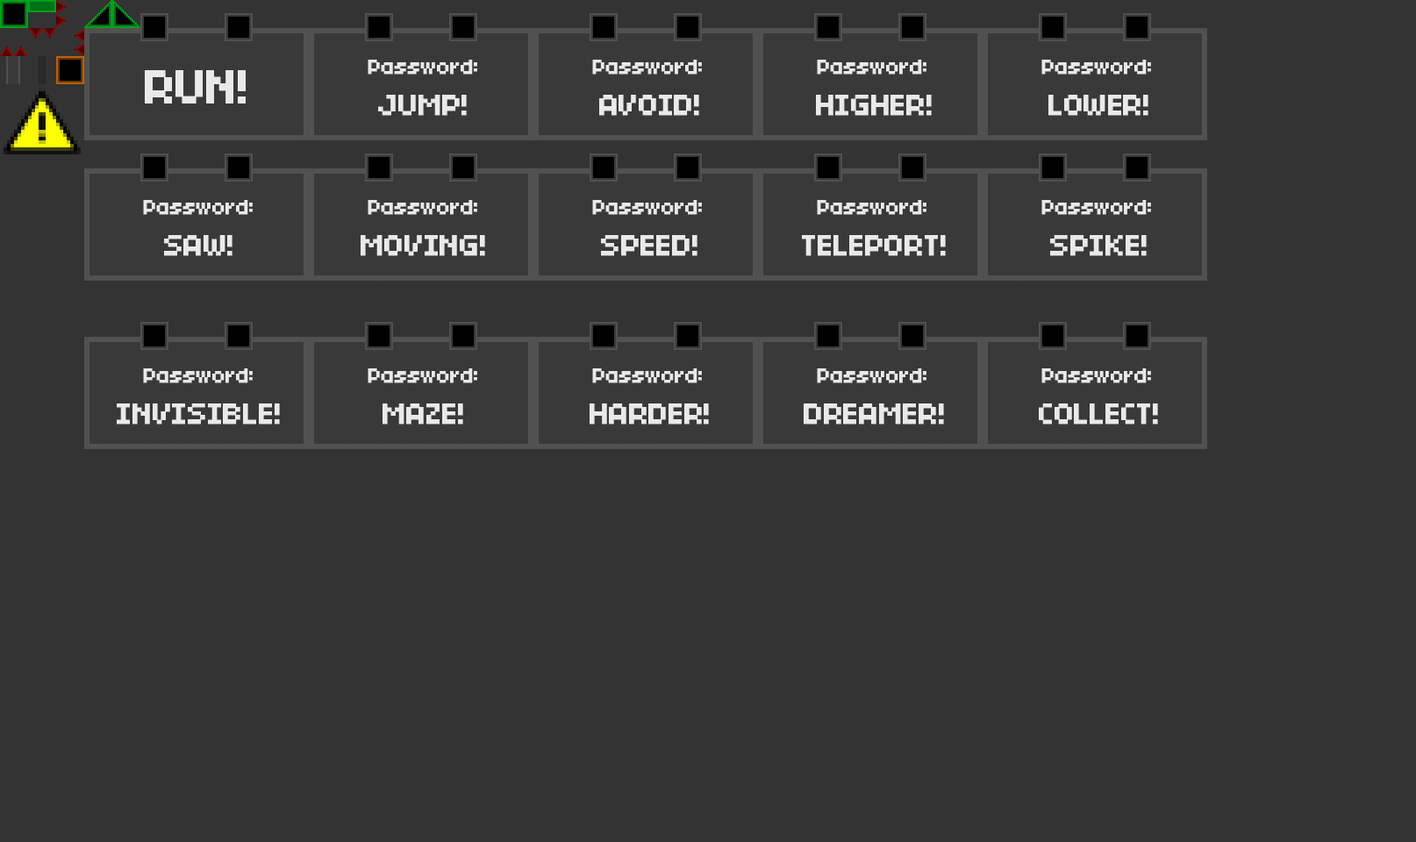
<style>
.page{position:relative;width:1416px;height:842px;background:#333333}
.page>*{position:absolute;margin:0}
.t1{font:21.9px "04b03";letter-spacing:-0.05em;color:#eae9e9;font-weight:bold}
.t2{font:51.6px "04b03";letter-spacing:-0.05em;color:#eae9e9;font-weight:bold}
.t3{font:32.9px "04b03";letter-spacing:-0.05em;color:#eae9e9;font-weight:bold}
</style>
<div class="page">
<p class="t1" style="left:368px;top:60px;width:109px;height:15px">Password:</p>
<p class="t1" style="left:592px;top:60px;width:110px;height:15px">Password:</p>
<p class="t1" style="left:817px;top:60px;width:109px;height:15px">Password:</p>
<p class="t1" style="left:817px;top:60px;width:109px;height:15px">Password:</p>
<p class="t1" style="left:1041px;top:60px;width:110px;height:15px">Password:</p>
<p class="t2" style="left:145px;top:70px;width:101px;height:34px">RUN!</p>
<p class="t3" style="left:378px;top:95px;width:89px;height:21px">JUMP!</p>
<p class="t3" style="left:599px;top:95px;width:100px;height:21px">AVOID!</p>
<p class="t3" style="left:816px;top:95px;width:116px;height:21px">HIGHER!</p>
<p class="t3" style="left:1048px;top:95px;width:100px;height:21px">LOWER!</p>
<p class="t1" style="left:143px;top:200px;width:110px;height:15px">Password:</p>
<p class="t1" style="left:368px;top:200px;width:109px;height:15px">Password:</p>
<p class="t1" style="left:592px;top:200px;width:110px;height:15px">Password:</p>
<p class="t1" style="left:817px;top:200px;width:109px;height:15px">Password:</p>
<p class="t1" style="left:1041px;top:200px;width:110px;height:15px">Password:</p>
<p class="t3" style="left:164px;top:235px;width:68px;height:21px">SAW!</p>
<p class="t3" style="left:361px;top:235px;width:124px;height:21px">MOVING!</p>
<p class="t3" style="left:601px;top:235px;width:96px;height:21px">SPEED!</p>
<p class="t3" style="left:802px;top:235px;width:144px;height:21px">TELEPORT!</p>
<p class="t3" style="left:1050px;top:235px;width:97px;height:21px">SPIKE!</p>
<p class="t1" style="left:143px;top:368px;width:110px;height:15px">Password:</p>
<p class="t1" style="left:368px;top:368px;width:109px;height:15px">Password:</p>
<p class="t1" style="left:592px;top:368px;width:110px;height:15px">Password:</p>
<p class="t1" style="left:817px;top:368px;width:109px;height:15px">Password:</p>
<p class="t1" style="left:1041px;top:368px;width:110px;height:15px">Password:</p>
<p class="t3" style="left:117px;top:404px;width:163px;height:21px">INVISIBLE!</p>
<p class="t3" style="left:382px;top:404px;width:81px;height:21px">MAZE!</p>
<p class="t3" style="left:590px;top:404px;width:119px;height:21px">HARDER!</p>
<p class="t3" style="left:804px;top:404px;width:140px;height:21px">DREAMER!</p>
<p class="t3" style="left:1039px;top:404px;width:119px;height:21px">COLLECT!</p>
</div>
